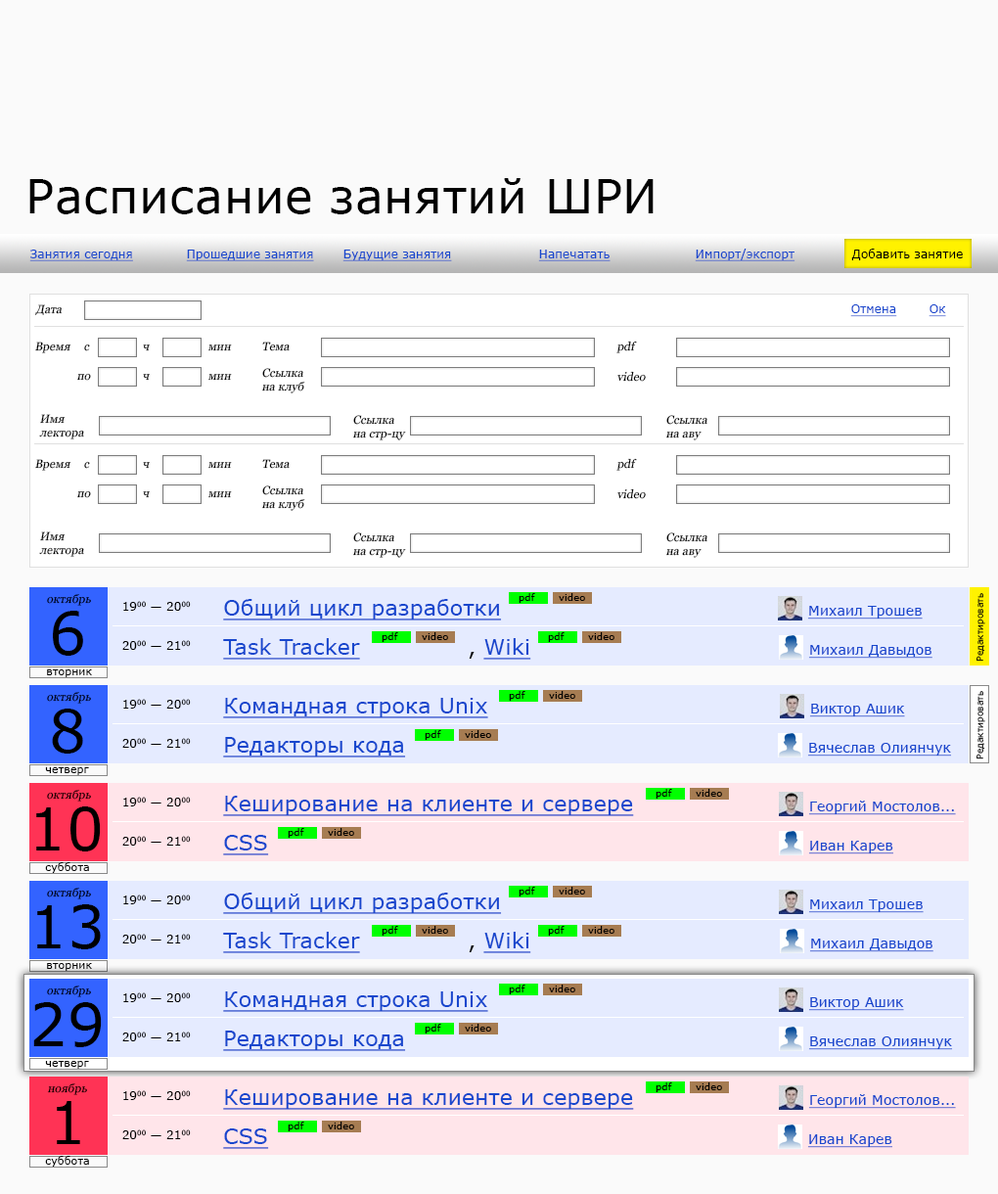
<style>
.page{position:relative;width:998px;height:1194px;background:#fafafa}
.page>*{position:absolute;margin:0}
.t1{font:47px "Verdana";letter-spacing:0.01em;color:#000000}
.t2{font:11.7px "Verdana";letter-spacing:0.01em;color:#1847cd;text-decoration:underline}
.t3{font:11.7px "Verdana";letter-spacing:0.01em;color:#000000}
.t4{font:11.7px "Georgia";letter-spacing:0.01em;color:#000000;font-style:italic}
.t5{font:11.7px "Georgia";letter-spacing:0.01em;font-style:italic}
.t6{font:9.8px "Verdana";letter-spacing:0.01em;color:#000000}
.t7{font:8.8px "Verdana";letter-spacing:0.01em;color:#000000}
.t8{font:21.5px "Verdana";letter-spacing:0.01em;color:#1847cd;text-decoration:underline}
.t9{font:13.7px "Verdana";letter-spacing:0.01em;color:#1847cd;text-decoration:underline}
.t10{font:58.7px "Verdana";letter-spacing:0.01em;color:#000000}
.t11{font:21.5px "Verdana";letter-spacing:0.01em;color:#000000}
.t12{font:10.8px "Verdana";letter-spacing:0.01em;color:#000000}
</style>
<div class="page">
<p class="t1" style="left:29px;top:178px;width:625px;height:36px">Расписание занятий ШРИ</p>
<p class="t2" style="left:29px;top:250px;width:104px;height:11px">Занятия сегодня</p>
<p class="t2" style="left:186px;top:250px;width:128px;height:11px">Прошедшие занятия</p>
<p class="t2" style="left:343px;top:250px;width:109px;height:11px">Будущие занятия</p>
<p class="t2" style="left:538px;top:250px;width:73px;height:11px">Напечатать</p>
<p class="t2" style="left:695px;top:249px;width:101px;height:12px">Импорт/экспорт</p>
<p class="t3" style="left:852px;top:249px;width:111px;height:11px">Добавить занятие</p>
<p class="t4" style="left:35px;top:304px;width:28px;height:11px">Дата</p>
<p class="t2" style="left:851px;top:304px;width:47px;height:13px">Отмена</p>
<p class="t2" style="left:929px;top:304px;width:18px;height:13px">Ок</p>
<p class="t4" style="left:35px;top:342px;width:36px;height:11px">Время</p>
<p class="t4" style="left:262px;top:342px;width:28px;height:9px">Тема</p>
<p class="t4" style="left:617px;top:341px;width:20px;height:12px">pdf</p>
<p class="t5" style="left:84px;top:344px;width:6px;height:7px">с</p>
<p class="t5" style="left:143px;top:345px;width:7px;height:6px">ч</p>
<p class="t4" style="left:208px;top:345px;width:24px;height:6px">мин</p>
<p class="t4" style="left:76px;top:373px;width:15px;height:8px">по</p>
<p class="t5" style="left:143px;top:374px;width:7px;height:7px">ч</p>
<p class="t4" style="left:208px;top:374px;width:24px;height:7px">мин</p>
<p class="t4" style="left:261px;top:368px;width:44px;height:26px">Ссылка<br>на клуб</p>
<p class="t4" style="left:618px;top:371px;width:28px;height:11px">video</p>
<p class="t4" style="left:39px;top:414px;width:45px;height:26px">Имя<br>лектора</p>
<p class="t4" style="left:352px;top:415px;width:54px;height:26px">Ссылка<br>на стр-цу</p>
<p class="t4" style="left:666px;top:415px;width:42px;height:26px">Ссылка<br>на аву</p>
<p class="t4" style="left:35px;top:459px;width:36px;height:12px">Время</p>
<p class="t5" style="left:84px;top:461px;width:6px;height:8px">с</p>
<p class="t4" style="left:262px;top:459px;width:28px;height:10px">Тема</p>
<p class="t4" style="left:617px;top:458px;width:20px;height:13px">pdf</p>
<p class="t5" style="left:143px;top:462px;width:7px;height:7px">ч</p>
<p class="t4" style="left:208px;top:462px;width:24px;height:7px">мин</p>
<p class="t4" style="left:261px;top:486px;width:44px;height:25px">Ссылка<br>на клуб</p>
<p class="t4" style="left:76px;top:490px;width:15px;height:8px">по</p>
<p class="t5" style="left:143px;top:491px;width:7px;height:7px">ч</p>
<p class="t4" style="left:208px;top:491px;width:24px;height:7px">мин</p>
<p class="t4" style="left:618px;top:488px;width:28px;height:11px">video</p>
<p class="t4" style="left:39px;top:532px;width:45px;height:25px">Имя<br>лектора</p>
<p class="t4" style="left:352px;top:533px;width:54px;height:25px">Ссылка<br>на стр-цу</p>
<p class="t4" style="left:666px;top:533px;width:42px;height:25px">Ссылка<br>на аву</p>
<p class="t6" style="left:519px;top:593px;width:16px;height:10px">pdf</p>
<p class="t6" style="left:559px;top:593px;width:26px;height:8px">video</p>
<p class="t7" style="left:977px;top:593px;width:9px;height:69px;rotate:-90deg">Редактировать</p>
<p class="t4" style="left:47px;top:594px;width:44px;height:12px">октябрь</p>
<p class="t3" style="left:123px;top:601px;width:68px;height:10px">1900 — 2000</p>
<p class="t8" style="left:223px;top:599px;width:279px;height:22px">Общий цикл разработки</p>
<p class="t9" style="left:808px;top:606px;width:115px;height:14px">Михаил Трошев</p>
<p class="t10" style="left:53px;top:611px;width:30px;height:45px">6</p>
<p class="t3" style="left:122px;top:640px;width:69px;height:10px">2000 — 2100</p>
<p class="t8" style="left:223px;top:638px;width:137px;height:22px">Task Tracker</p>
<p class="t6" style="left:382px;top:632px;width:16px;height:10px">pdf</p>
<p class="t6" style="left:422px;top:632px;width:26px;height:8px">video</p>
<p class="t8" style="left:469px;top:638px;width:63px;height:22px"><span class="t11">, </span>Wiki</p>
<p class="t6" style="left:548px;top:632px;width:17px;height:10px">pdf</p>
<p class="t6" style="left:588px;top:632px;width:27px;height:8px">video</p>
<p class="t9" style="left:809px;top:645px;width:124px;height:14px">Михаил Давыдов</p>
<p class="t12" style="left:47px;top:670px;width:45px;height:7px">вторник</p>
<p class="t4" style="left:47px;top:692px;width:44px;height:12px">октябрь</p>
<p class="t3" style="left:123px;top:699px;width:68px;height:10px">1900 — 2000</p>
<p class="t8" style="left:223px;top:698px;width:265px;height:21px">Командная строка Unix</p>
<p class="t6" style="left:509px;top:691px;width:17px;height:10px">pdf</p>
<p class="t6" style="left:549px;top:691px;width:27px;height:8px">video</p>
<p class="t7" style="left:977px;top:691px;width:9px;height:69px;rotate:-90deg">Редактировать</p>
<p class="t10" style="left:52px;top:709px;width:31px;height:45px">8</p>
<p class="t9" style="left:810px;top:704px;width:95px;height:14px">Виктор Ашик</p>
<p class="t8" style="left:223px;top:737px;width:183px;height:21px">Редакторы кода</p>
<p class="t6" style="left:425px;top:730px;width:16px;height:10px">pdf</p>
<p class="t6" style="left:465px;top:730px;width:26px;height:8px">video</p>
<p class="t3" style="left:122px;top:738px;width:69px;height:10px">2000 — 2100</p>
<p class="t9" style="left:808px;top:743px;width:144px;height:14px">Вячеслав Олиянчук</p>
<p class="t12" style="left:45px;top:767px;width:44px;height:8px">четверг</p>
<p class="t4" style="left:47px;top:790px;width:44px;height:12px">октябрь</p>
<p class="t3" style="left:123px;top:797px;width:68px;height:10px">1900 — 2000</p>
<p class="t8" style="left:223px;top:796px;width:411px;height:20px">Кеширование на клиенте и сервере</p>
<p class="t6" style="left:656px;top:789px;width:17px;height:10px">pdf</p>
<p class="t6" style="left:696px;top:789px;width:26px;height:8px">video</p>
<p class="t10" style="left:36px;top:807px;width:65px;height:45px">10</p>
<p class="t9" style="left:809px;top:801px;width:147px;height:14px">Георгий Мостолов...</p>
<p class="t6" style="left:288px;top:828px;width:16px;height:10px">pdf</p>
<p class="t6" style="left:328px;top:828px;width:26px;height:8px">video</p>
<p class="t3" style="left:122px;top:836px;width:69px;height:10px">2000 — 2100</p>
<p class="t8" style="left:223px;top:835px;width:46px;height:21px">CSS</p>
<p class="t9" style="left:809px;top:841px;width:85px;height:14px">Иван Карев</p>
<p class="t12" style="left:45px;top:862px;width:44px;height:11px">суббота</p>
<p class="t4" style="left:47px;top:888px;width:44px;height:12px">октябрь</p>
<p class="t8" style="left:223px;top:893px;width:279px;height:21px">Общий цикл разработки</p>
<p class="t6" style="left:519px;top:887px;width:16px;height:10px">pdf</p>
<p class="t6" style="left:559px;top:887px;width:26px;height:8px">video</p>
<p class="t10" style="left:37px;top:905px;width:64px;height:45px">13</p>
<p class="t3" style="left:123px;top:895px;width:68px;height:10px">1900 — 2000</p>
<p class="t9" style="left:809px;top:900px;width:115px;height:13px">Михаил Трошев</p>
<p class="t6" style="left:382px;top:926px;width:16px;height:10px">pdf</p>
<p class="t6" style="left:422px;top:926px;width:26px;height:8px">video</p>
<p class="t6" style="left:548px;top:926px;width:17px;height:10px">pdf</p>
<p class="t6" style="left:588px;top:926px;width:27px;height:8px">video</p>
<p class="t3" style="left:122px;top:934px;width:69px;height:10px">2000 — 2100</p>
<p class="t8" style="left:223px;top:932px;width:137px;height:21px">Task Tracker</p>
<p class="t8" style="left:469px;top:932px;width:63px;height:21px"><span class="t11">, </span>Wiki</p>
<p class="t9" style="left:810px;top:939px;width:124px;height:13px">Михаил Давыдов</p>
<p class="t12" style="left:47px;top:963px;width:45px;height:8px">вторник</p>
<p class="t4" style="left:47px;top:986px;width:44px;height:11px">октябрь</p>
<p class="t6" style="left:509px;top:985px;width:17px;height:10px">pdf</p>
<p class="t6" style="left:549px;top:985px;width:27px;height:8px">video</p>
<p class="t3" style="left:123px;top:993px;width:68px;height:9px">1900 — 2000</p>
<p class="t8" style="left:223px;top:992px;width:265px;height:20px">Командная строка Unix</p>
<p class="t9" style="left:809px;top:997px;width:96px;height:14px">Виктор Ашик</p>
<p class="t10" style="left:33px;top:1002px;width:69px;height:45px">29</p>
<p class="t6" style="left:425px;top:1024px;width:16px;height:10px">pdf</p>
<p class="t6" style="left:465px;top:1024px;width:26px;height:8px">video</p>
<p class="t3" style="left:122px;top:1032px;width:69px;height:10px">2000 — 2100</p>
<p class="t8" style="left:223px;top:1031px;width:183px;height:20px">Редакторы кода</p>
<p class="t9" style="left:809px;top:1037px;width:144px;height:13px">Вячеслав Олиянчук</p>
<p class="t12" style="left:45px;top:1061px;width:44px;height:8px">четверг</p>
<p class="t4" style="left:47px;top:1084px;width:40px;height:11px">ноябрь</p>
<p class="t6" style="left:656px;top:1083px;width:17px;height:9px">pdf</p>
<p class="t6" style="left:696px;top:1083px;width:26px;height:7px">video</p>
<p class="t3" style="left:123px;top:1090px;width:68px;height:10px">1900 — 2000</p>
<p class="t8" style="left:223px;top:1090px;width:411px;height:20px">Кеширование на клиенте и сервере</p>
<p class="t9" style="left:809px;top:1094px;width:147px;height:15px">Георгий Мостолов...</p>
<p class="t10" style="left:57px;top:1101px;width:23px;height:43px">1</p>
<p class="t6" style="left:288px;top:1122px;width:16px;height:10px">pdf</p>
<p class="t6" style="left:328px;top:1122px;width:26px;height:8px">video</p>
<p class="t3" style="left:122px;top:1130px;width:69px;height:9px">2000 — 2100</p>
<p class="t8" style="left:223px;top:1129px;width:46px;height:20px">CSS</p>
<p class="t9" style="left:808px;top:1135px;width:85px;height:13px">Иван Карев</p>
<p class="t12" style="left:45px;top:1156px;width:44px;height:11px">суббота</p>
</div>
